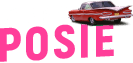
<style>
.page{position:relative;width:133px;height:63px;background:#ffffff}
.page>*{position:absolute;margin:0}
.t1{font:48px "Akrobat-Black";letter-spacing:0.05em;color:#ff3e99}
</style>
<div class="page">
<p class="t1" style="left:0px;top:22px;width:114px;height:40px;rotate:-3deg">POSIE</p>
</div>
